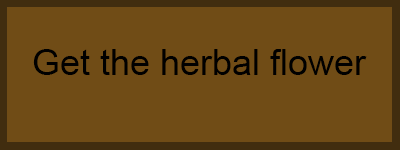
<style>
.page{position:relative;width:400px;height:150px;background:#704c16}
.page>*{position:absolute;margin:0}
.t1{font:36px "ArialMT";color:#000000}
</style>
<div class="page">
<p class="t1" style="left:33px;top:49px;width:334px;height:26px">Get the herbal flower</p>
</div>
